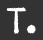
<style>
.page{position:relative;width:43px;height:40px;background:#333333}
.page>*{position:absolute;margin:0}
.t1{font:42px "Magda-Plain";letter-spacing:-0.2em;color:#ffffff}
.t2{font:42px "Magda-Thin";letter-spacing:-0.2em;color:#ffffff}
</style>
<div class="page">
<p class="t1" style="left:6px;top:7px;width:30px;height:27px">T<span class="t2">.</span></p>
</div>
